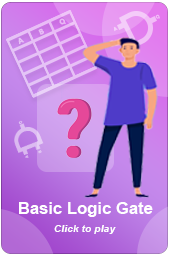
<style>
.page{position:relative;width:170px;height:256px}
.page>*{position:absolute;margin:0}
.t1{font:7.3px "SegoeUIVariable-BoldText";color:#e7bdf5}
.t2{font:7.3px "SegoeUIVariable-BoldText";color:#e9b8f5}
.t3{font:7.3px "SegoeUIVariable-BoldText";color:#e5c1f5}
.t4{font:16.7px "Arial-BoldMT";color:#ffffff}
.t5{font:10.4px "Arial-BoldItalicMT";color:#ffffff}
</style>
<div class="page">
<p class="t1" style="left:38px;top:28px;width:6px;height:7px;rotate:-25deg">B</p>
<p class="t2" style="left:59px;top:18px;width:7px;height:7px;rotate:-25deg">Q</p>
<p class="t3" style="left:18px;top:37px;width:7px;height:8px;rotate:-25deg">A</p>
<p class="t4" style="left:19px;top:202px;width:134px;height:15px">Basic Logic Gate</p>
<p class="t5" style="left:54px;top:225px;width:62px;height:9px">Click to play</p>
</div>
